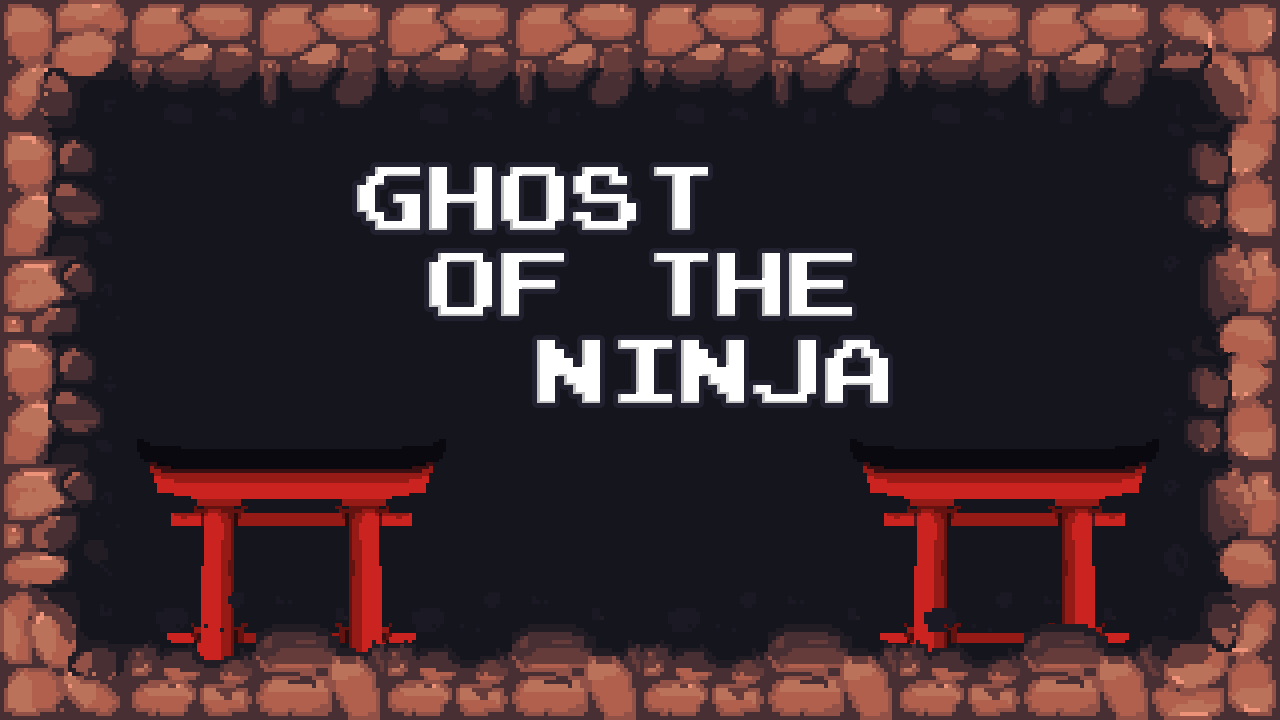
<style>
.page{position:relative;width:1280px;height:720px;background:#15151d}
.page>*{position:absolute;margin:0}
.t1{font:72px "PressStart2P";color:#ffffff}
</style>
<div class="page">
<p class="t1" style="left:357px;top:167px;width:531px;height:236px">GHOST<br> OF THE<br>     NINJA</p>
</div>
